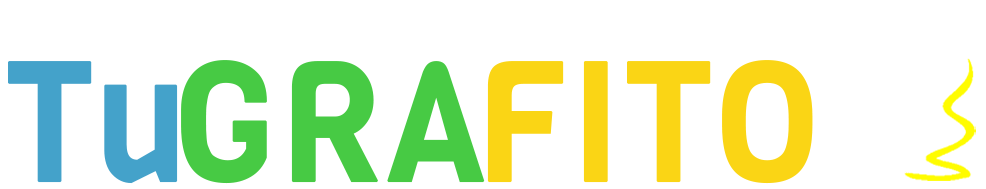
<style>
.page{position:relative;width:986px;height:189px;background:#ffffff}
.page>*{position:absolute;margin:0}
.t1{font:167px "Viga-Regular";color:#44a2ca;font-weight:bold;scale:0.93 1}
.t2{font:167px "Viga-Regular";color:#47ca44;font-weight:bold;scale:0.93 1}
.t3{font:167px "Viga-Regular";color:#fad515;font-weight:bold;scale:0.93 1}
</style>
<div class="page">
<p class="t1" style="left:8px;top:61px;width:170px;height:123px">Tu</p>
<p class="t2" style="left:181px;top:60px;width:304px;height:124px">GRA</p>
<p class="t3" style="left:487px;top:60px;width:326px;height:124px">FITO</p>
</div>
